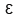
<style>
.page{position:relative;width:19px;height:19px;background:#ffffff}
.page>*{position:absolute;margin:0}
.t1{font:12.5px "ArialMT";color:#131212}
</style>
<div class="page">
<p class="t1" style="left:5px;top:4px;width:8px;height:10px">Ɛ</p>
</div>
